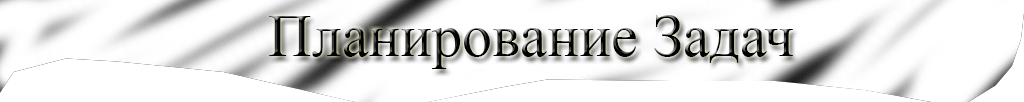
<style>
.page{position:relative;width:1024px;height:102px;background:#ffffff}
.page>*{position:absolute;margin:0}
.t1{font:60px "TimesNewRomanPSMT"}
</style>
<div class="page">
<p class="t1" style="left:269px;top:15px;width:524px;height:54px">Планирование Задач</p>
</div>
